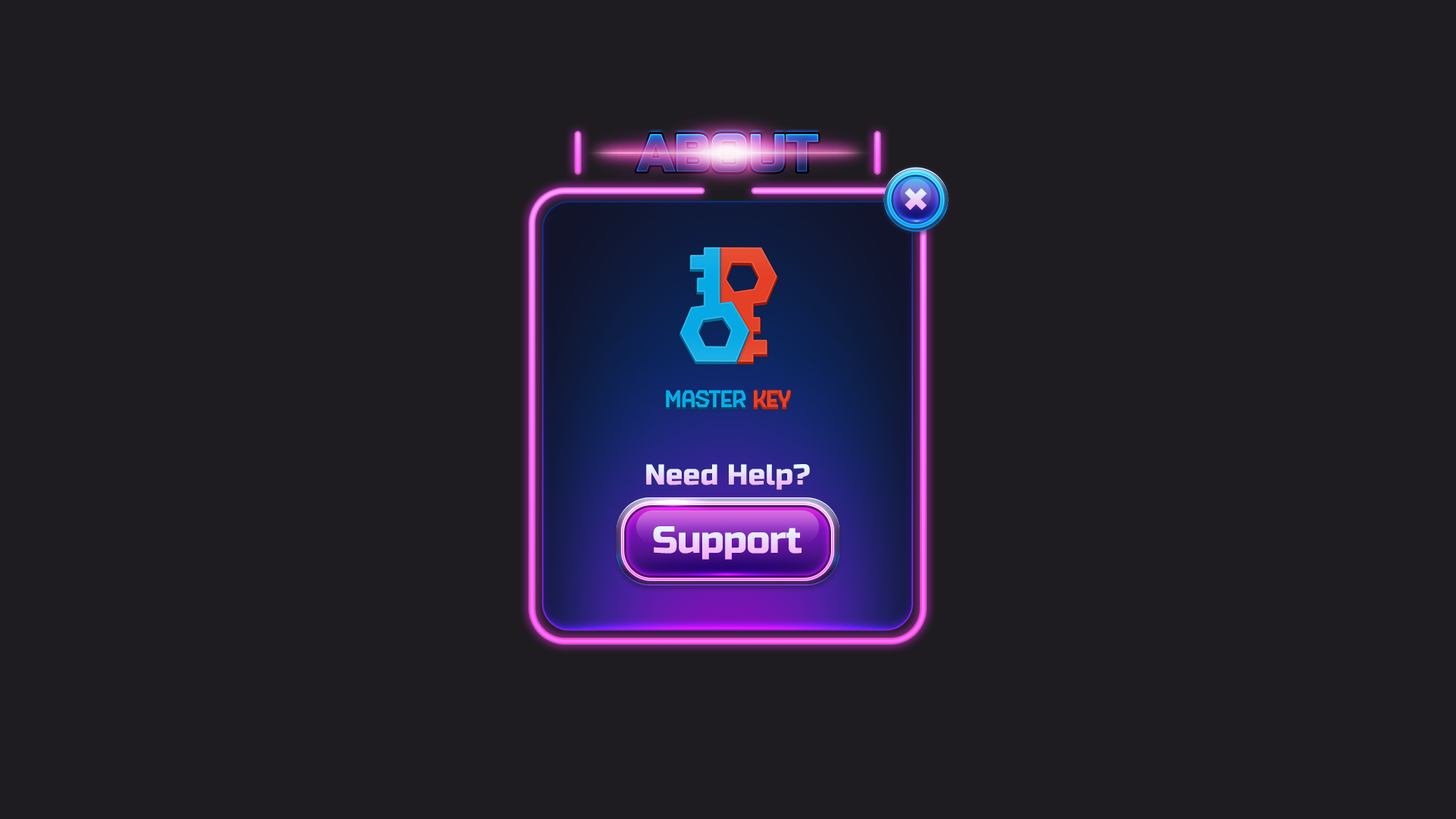
<style>
.page{position:relative;width:1456px;height:819px;background:#1e1c20}
.page>*{position:absolute;margin:0}
.t1{font:53.1px "RussoOne-Regular";letter-spacing:-0.025em;text-transform:uppercase}
.t2{font:28.8px "RussoOne-Regular"}
.t3{font:37.9px "RussoOne-Regular";letter-spacing:-0.025em}
</style>
<div class="page">
<p class="t1" style="left:636px;top:133px;width:182px;height:39px">About</p>
<p class="t2" style="left:646px;top:464px;width:164px;height:26px">Need Help?</p>
<p class="t3" style="left:653px;top:526px;width:149px;height:34px">Support</p>
</div>
